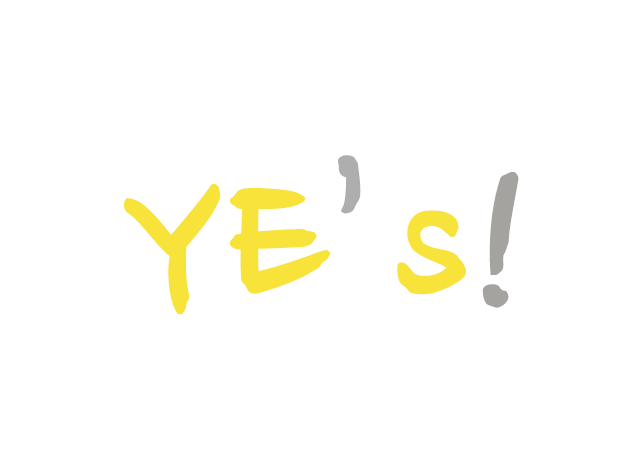
<style>
.page{position:relative;width:642px;height:470px;background:#ffffff}
.page>*{position:absolute;margin:0}
.t1{font:210px "NanumBrush";color:#f7e33a;font-weight:bold}
.t2{font:210px "NanumBrush";color:#aeaeae;font-weight:bold}
.t3{font:210px "NanumBrush";color:#a5a3a0;font-weight:bold}
</style>
<div class="page">
<p class="t1" style="left:123px;top:155px;width:396px;height:160px">YE<span class="t2">’</span>s<span class="t3">!</span></p>
</div>
